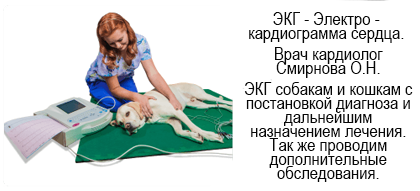
<style>
.page{position:relative;width:420px;height:191px;background:#ffffff}
.page>*{position:absolute;margin:0}
.t1{font:18px/7px "ArialNarrow";letter-spacing:0.002em;color:#070707}
</style>
<div class="page">
<p class="t1" style="left:244px;top:12px;width:169px;height:170px;text-align:center">ЭКГ - Электро -<br><br>кардиограмма сердца.<br><br><br> Врач кардиолог<br><br> Смирнова О.Н.<br><br><br> ЭКГ собакам и кошкам с<br><br> постановкой диагноза и<br><br> дальнейшим<br><br> назначением лечения.<br><br> Так же проводим<br><br> дополнительные<br><br> обследования.</p>
</div>
